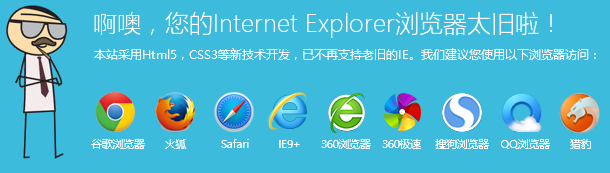
<style>
.page{position:relative;width:610px;height:173px;background:#3cbbdc}
.page>*{position:absolute;margin:0}
.t1{font:24px "MicrosoftYaHeiLight";color:#f8f8f8}
.t2{font:12px "MicrosoftYaHei";color:#f8f8f8}
.t3{font:10.7px "MicrosoftYaHei";color:#ffffff}
</style>
<div class="page">
<p class="t1" style="left:94px;top:12px;width:458px;height:26px">啊噢，您的Internet Explorer浏览器太旧啦！</p>
<p class="t2" style="left:94px;top:48px;width:502px;height:12px">本站采用Html5，CSS3等新技术开发，已不再支持老旧的IE。我们建议您使用以下浏览器访问：</p>
<p class="t3" style="left:91px;top:139px;width:500px;height:10px">谷歌浏览器       火狐            Safari          IE9+       360浏览器    360极速     搜狗浏览器    QQ浏览器       猎豹</p>
</div>
